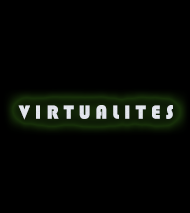
<style>
.page{position:relative;width:190px;height:213px;background:#000000}
.page>*{position:absolute;margin:0}
.t1{font:20px "Bauhaus93";color:#dbdce5}
</style>
<div class="page">
<p class="t1" style="left:18px;top:105px;width:155px;height:15px">V I R T U A L I T E S</p>
</div>
